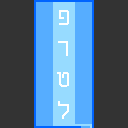
<style>
.page{position:relative;width:128px;height:128px;background:#333333}
.page>*{position:absolute;margin:0}
.t1{font:26px "MiriamFixed";color:#ffffff}
</style>
<div class="page">
<p class="t1" style="left:57px;top:10px;width:12px;height:109px;text-align:center">פ<br>ר<br>ט<br>ל</p>
</div>
